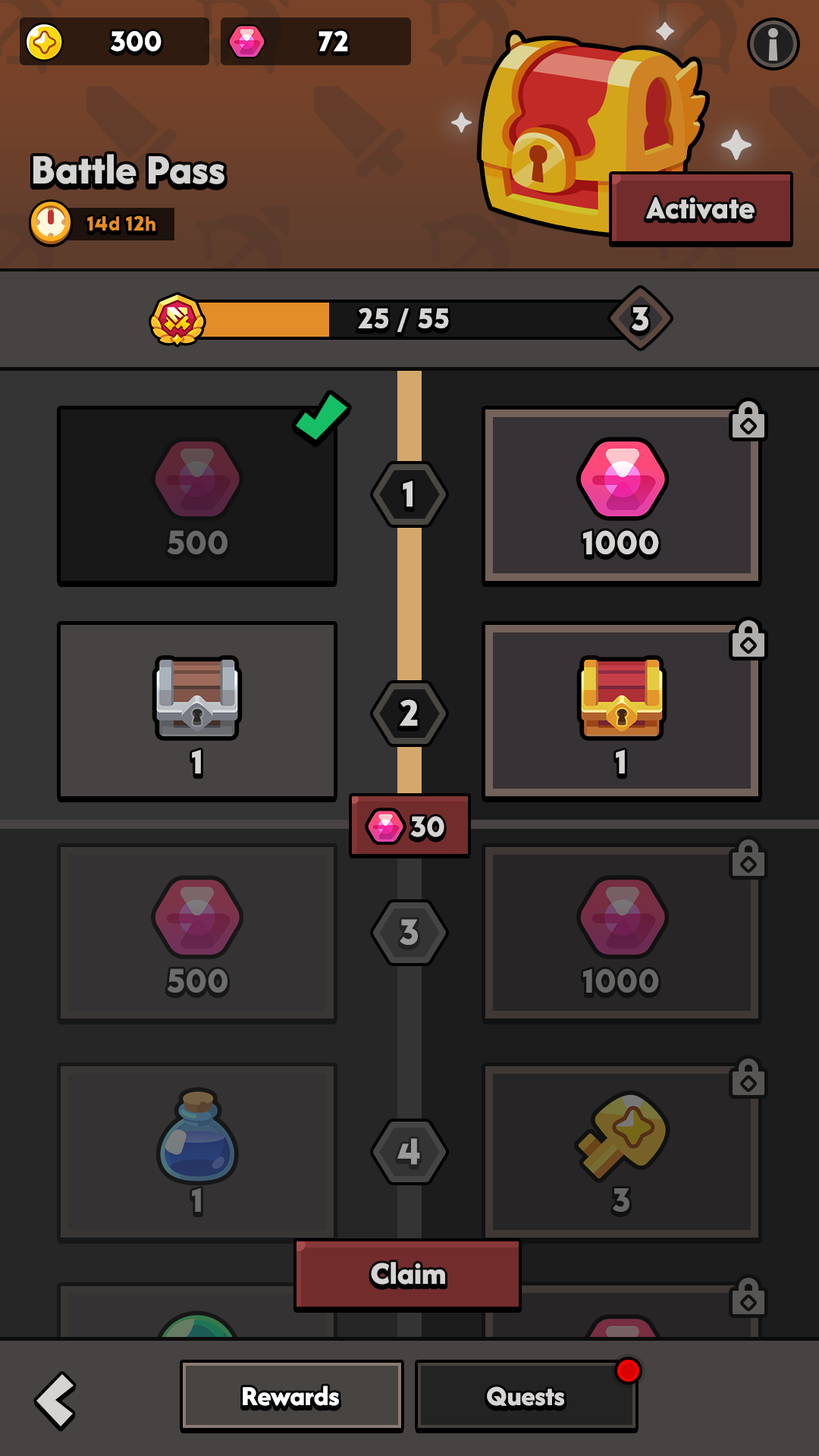
<style>
.page{position:relative;width:819px;height:1456px}
.page>*{position:absolute;margin:0}
.t1{font:29.6px "LTAvocado-Bold";color:#ffffff}
.t2{font:43.7px "AfacadFlux-ExtraBold";color:#d6d4d3}
.t3{font:33.4px "AfacadFlux-ExtraBold";color:#d6d4d3}
.t4{font:21.2px "LTAvocado-Bold";color:#e28d27}
.t5{font:29.6px "LTAvocado-Bold";color:#d6d4d3;text-transform:uppercase}
.t6{font:34.9px "LTAvocado-Bold";color:#d6d4d3;text-transform:uppercase}
.t7{font:37.9px "LTAvocado-Bold";color:#d6d4d3;text-transform:uppercase}
.t8{font:34.9px "LTAvocado-Bold";color:#686767;text-transform:uppercase}
.t9{font:34.9px "LTAvocado-Bold";color:#d6d4d3}
.t10{font:30.3px "LTAvocado-Bold";color:#d6d4d3}
.t11{font:37.9px "LTAvocado-Bold";color:#9a9a9a;text-transform:uppercase}
.t12{font:34.9px "LTAvocado-Bold";color:#6c6c6b;text-transform:uppercase}
.t13{font:34.9px "LTAvocado-Bold";color:#666665;text-transform:uppercase}
.t14{font:32.8px "AfacadFlux-ExtraBold";color:#d6d4d3}
.t15{font:28.8px "AfacadFlux-ExtraBold";color:#ffffff}
.t16{font:28.8px "AfacadFlux-ExtraBold";color:#d6d4d3}
</style>
<div class="page">
<p class="t1" style="left:111px;top:31px;width:51px;height:21px">300</p>
<p class="t1" style="left:318px;top:30px;width:30px;height:22px">72</p>
<p class="t2" style="left:33px;top:154px;width:191px;height:30px">Battle Pass</p>
<p class="t3" style="left:646px;top:197px;width:109px;height:22px">Activate</p>
<p class="t4" style="left:87px;top:215px;width:68px;height:16px">14d 12h</p>
<p class="t5" style="left:358px;top:308px;width:91px;height:24px">25 / 55</p>
<p class="t6" style="left:632px;top:307px;width:16px;height:24px">3</p>
<p class="t7" style="left:403px;top:481px;width:10px;height:26px">1</p>
<p class="t8" style="left:167px;top:530px;width:60px;height:24px">500</p>
<p class="t6" style="left:583px;top:530px;width:76px;height:24px">1000</p>
<p class="t7" style="left:399px;top:699px;width:19px;height:27px">2</p>
<p class="t9" style="left:192px;top:749px;width:9px;height:24px">1</p>
<p class="t6" style="left:616px;top:749px;width:9px;height:24px">1</p>
<p class="t10" style="left:410px;top:816px;width:34px;height:21px">30</p>
<p class="t11" style="left:400px;top:919px;width:18px;height:26px">3</p>
<p class="t12" style="left:167px;top:968px;width:60px;height:25px">500</p>
<p class="t13" style="left:583px;top:968px;width:76px;height:25px">1000</p>
<p class="t11" style="left:397px;top:1138px;width:23px;height:27px">4</p>
<p class="t12" style="left:192px;top:1188px;width:9px;height:24px">1</p>
<p class="t13" style="left:613px;top:1188px;width:16px;height:24px">3</p>
<p class="t14" style="left:371px;top:1262px;width:74px;height:23px">Claim</p>
<p class="t15" style="left:243px;top:1385px;width:96px;height:21px">Rewards</p>
<p class="t15" style="left:243px;top:1385px;width:96px;height:21px">Rewards</p>
<p class="t16" style="left:487px;top:1386px;width:77px;height:20px">Quests</p>
</div>
